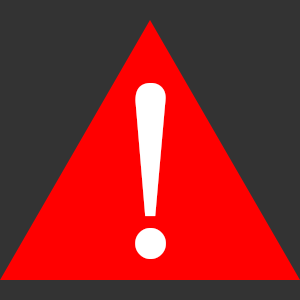
<style>
.page{position:relative;width:300px;height:300px;background:#333333}
.page>*{position:absolute;margin:0}
.t1{font:250px "BookmanOldStyle";color:#ffffff}
</style>
<div class="page">
<p class="t1" style="left:135px;top:83px;width:31px;height:176px">!</p>
</div>
